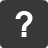
<style>
.page{position:relative;width:48px;height:48px;background:#383838}
.page>*{position:absolute;margin:0}
.t1{font:40.3px "Latha-Bold";color:#ffffff}
</style>
<div class="page">
<p class="t1" style="left:15px;top:11px;width:18px;height:26px">?</p>
</div>
